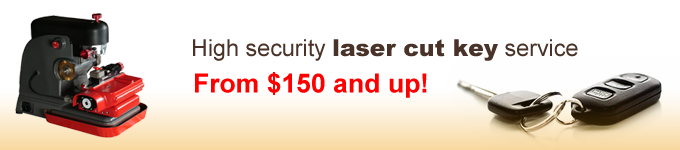
<style>
.page{position:relative;width:680px;height:150px;background:#ffffff}
.page>*{position:absolute;margin:0}
.t1{font:23.3px "ArialMT";color:#493227}
.t2{font:23.3px "Arial-Black";color:#493227}
.t3{font:26.6px "Arial-BoldMT";color:#ff0000}
</style>
<div class="page">
<p class="t1" style="left:193px;top:39px;width:385px;height:22px">High security <span class="t2">laser cut key</span> service</p>
<p class="t3" style="left:195px;top:72px;width:232px;height:26px">From $150 and up!</p>
</div>
